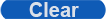
<style>
.page{position:relative;width:106px;height:19px;background:#0f5bb6}
.page>*{position:absolute;margin:0}
.t1{font:20px "Arial-BoldMT";color:#d9e1e9}
</style>
<div class="page">
<p class="t1" style="left:29px;top:2px;width:50px;height:15px">Clear</p>
</div>
